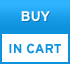
<style>
.page{position:relative;width:70px;height:64px;background:#ffffff}
.page>*{position:absolute;margin:0}
.t1{font:13px "InterstateMono-Bold";color:#0d92de}
</style>
<div class="page">
<p class="t1" style="left:9px;top:43px;width:52px;height:11px">IN CART</p>
</div>
